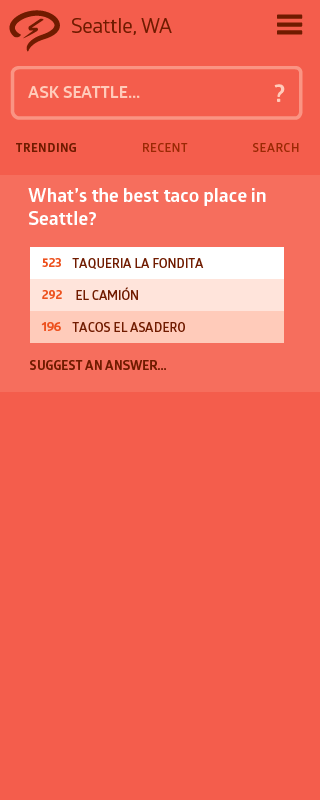
<style>
.page{position:relative;width:320px;height:800px;background:#f45d4c}
.page>*{position:absolute;margin:0}
.t1{font:20px "GloberRegular";color:#701b00}
.t2{font:16.7px "GloberBold";color:#ffcbba;text-transform:uppercase}
.t3{font:25.5px "GloberBold";color:#ffcbba;text-transform:uppercase}
.t4{font:12px "GloberSemiBold";letter-spacing:0.05em;color:#9b2904;text-transform:uppercase}
.t5{font:12px "GloberBold";letter-spacing:0.05em;color:#701b00;text-transform:uppercase}
.t6{font:19px "GloberBold";color:#ffffff}
.t7{font:12.7px "GloberBold";color:#ed511e;text-transform:uppercase}
.t8{font:12.7px "GloberSemiBold";color:#701b00;text-transform:uppercase}
.t9{font:12.7px "GloberBold";color:#701b00;text-transform:uppercase}
</style>
<div class="page">
<p class="t1" style="left:72px;top:18px;width:100px;height:17px">Seattle, WA</p>
<p class="t2" style="left:28px;top:86px;width:112px;height:12px">Ask Seattle...</p>
<p class="t3" style="left:274px;top:84px;width:11px;height:18px">?</p>
<p class="t4" style="left:16px;top:143px;width:283px;height:9px"><span class="t5">trending </span>recent search</p>
<p class="t6" style="left:28px;top:188px;width:238px;height:37px">What’s the best taco place in Seattle?</p>
<p class="t7" style="left:42px;top:258px;width:19px;height:9px">523</p>
<p class="t8" style="left:72px;top:258px;width:132px;height:11px">Taqueria La Fondita</p>
<p class="t7" style="left:42px;top:290px;width:20px;height:9px">292</p>
<p class="t8" style="left:76px;top:287px;width:62px;height:13px">El Camión</p>
<p class="t7" style="left:41px;top:322px;width:20px;height:9px">196</p>
<p class="t8" style="left:72px;top:322px;width:113px;height:10px">Tacos El Asadero</p>
<p class="t9" style="left:30px;top:360px;width:136px;height:10px">suggest an answer...</p>
</div>
